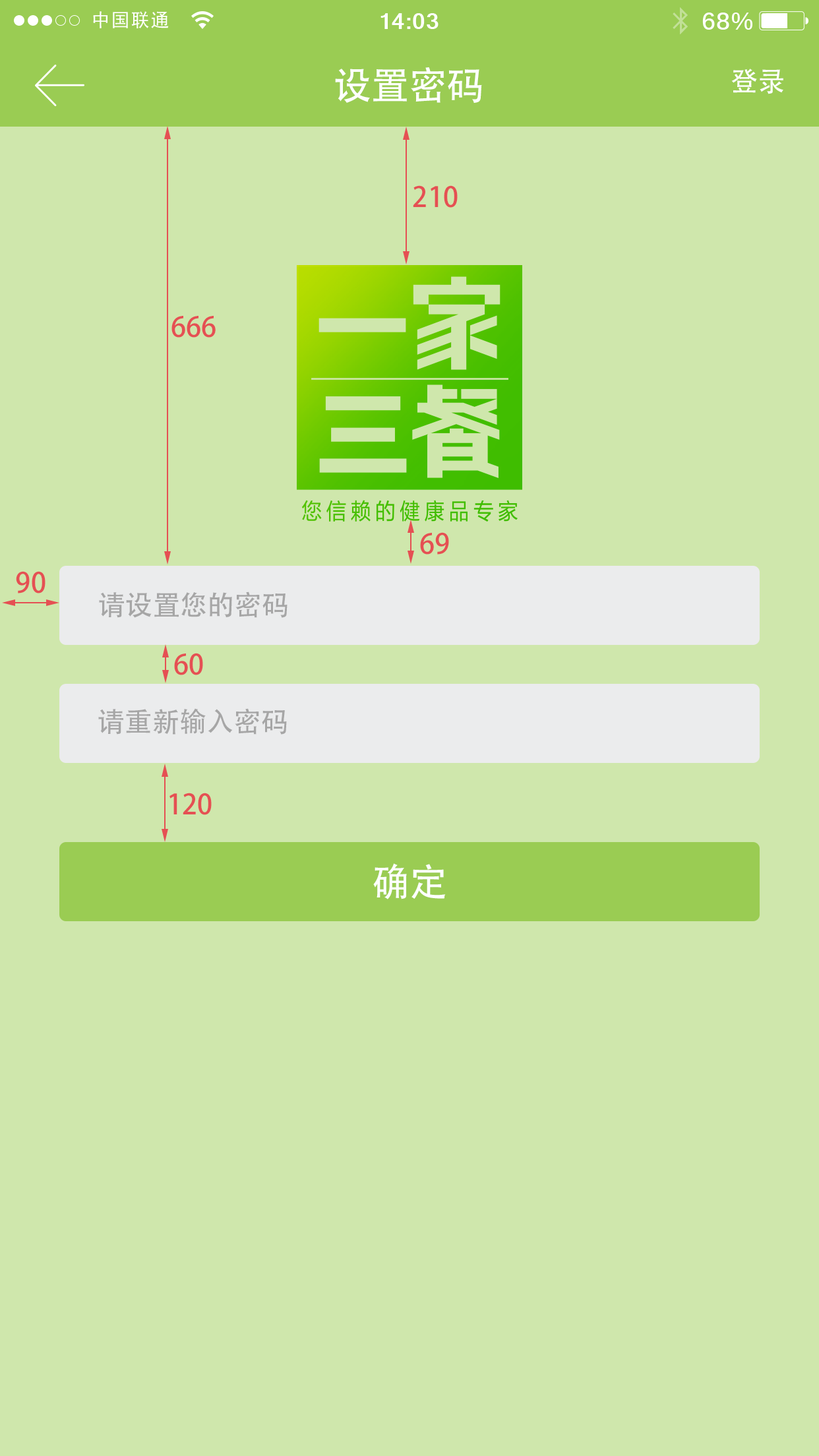
<style>
.page{position:relative;width:819px;height:1456px;background:#cfe7ac}
.page>*{position:absolute;margin:0}
.t1{font:38.2px "AdobeHeitiStd-Regular";color:#fefffe}
.t2{font:27.7px "AdobeHeitiStd-Regular";color:#fefffe}
.t3{font:27.7px "AdobeHeitiStd-Regular";color:#e55053}
.t4{font:27.7px "AdobeHeitiStd-Regular";color:#a6a6a6}
</style>
<div class="page">
<p class="t1" style="left:335px;top:67px;width:147px;height:36px">设置密码</p>
<p class="t2" style="left:731px;top:69px;width:52px;height:25px">登录</p>
<p class="t3" style="left:413px;top:185px;width:45px;height:23px">210</p>
<p class="t3" style="left:171px;top:316px;width:45px;height:22px">666</p>
<p class="t3" style="left:420px;top:532px;width:29px;height:23px">69</p>
<p class="t3" style="left:16px;top:571px;width:29px;height:22px">90</p>
<p class="t4" style="left:99px;top:591px;width:189px;height:27px">请设置您的密码</p>
<p class="t3" style="left:174px;top:653px;width:29px;height:22px">60</p>
<p class="t4" style="left:98px;top:708px;width:189px;height:27px">请重新输入密码</p>
<p class="t3" style="left:169px;top:793px;width:43px;height:22px">120</p>
<p class="t1" style="left:373px;top:863px;width:73px;height:36px">确定</p>
</div>
